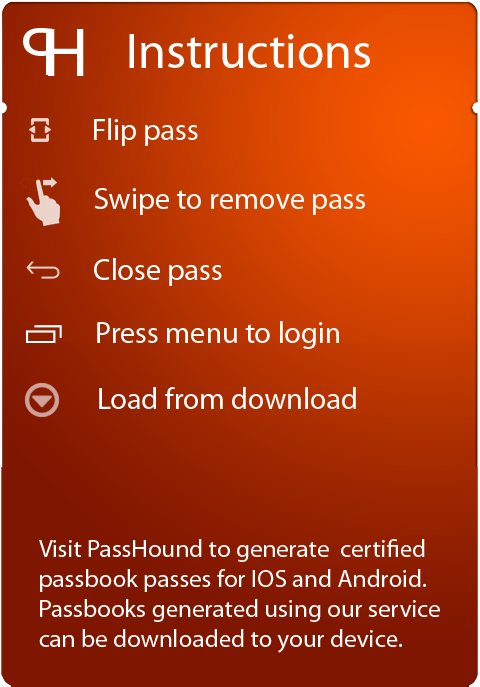
<style>
.page{position:relative;width:480px;height:687px}
.page>*{position:absolute;margin:0}
.t1{font:30px "MyriadPro-Regular";color:#ffffff}
.t2{font:25px "MyriadPro-Regular";color:#ffffff}
</style>
<div class="page">
<p class="t1" style="left:97px;top:321px;width:242px;height:28px">Press menu to login</p>
<p class="t1" style="left:99px;top:387px;width:257px;height:22px">Load from download</p>
<p class="t2" style="left:39px;top:539px;width:401px;height:114px">Visit PassHound to generate  certified<br>passbook passes for IOS and Android. <br>Passbooks generated using our service<br>can be downloaded to your device.</p>
</div>
